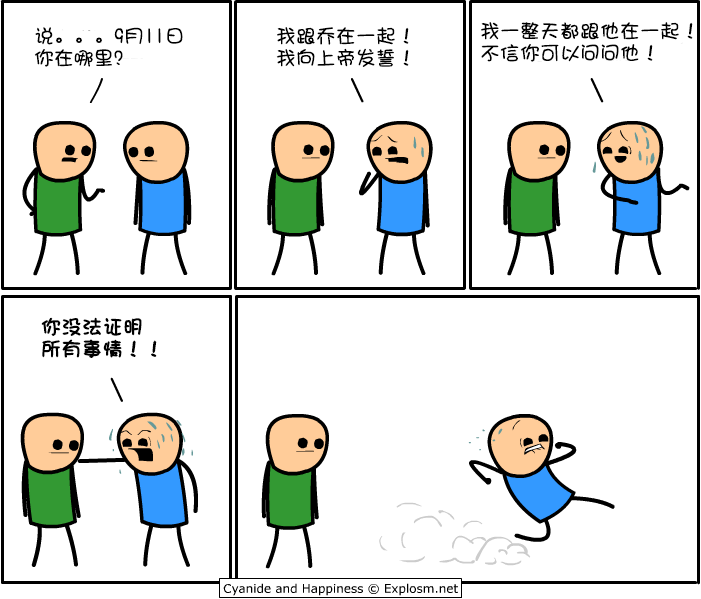
<style>
.page{position:relative;width:701px;height:599px;background:#ffffff}
.page>*{position:absolute;margin:0}
.t1{font:20px/22px "DFShaoNvW5";color:#000000}
.t2{font:18px/22px "DFShaoNvW5";color:#000000}
.t3{font:20px/22px "DFShaoNvW5";color:#000000;font-weight:bold}
</style>
<div class="page">
<p class="t1" style="left:34px;top:27px;width:149px;height:40px">说。。。9月11日<br>你在哪里<span class="t2">？</span></p>
<p class="t1" style="left:276px;top:27px;width:133px;height:40px">我跟乔在一起！<br>我向上帝发誓！</p>
<p class="t1" style="left:481px;top:22px;width:212px;height:40px">我一整天都跟他在一起！<br>不信你可以问问他！</p>
<p class="t3" style="left:41px;top:317px;width:116px;height:41px">你没法证明<br>所有事情！！</p>
</div>
